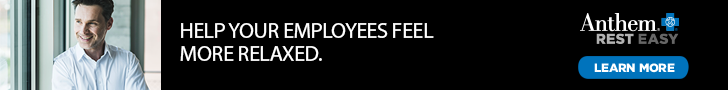
<style>
.page{position:relative;width:728px;height:90px;background:#000000}
.page>*{position:absolute;margin:0}
.t1{font:22px/23px "MyriadPro-Regular";letter-spacing:-0.02em;color:#ffffff;text-transform:uppercase}
.t2{font:12px "Gotham-Black";letter-spacing:-0.02em;color:#ffffff;text-transform:uppercase}
</style>
<div class="page">
<p class="t1" style="left:180px;top:23px;width:254px;height:38px">help your employees feel<br>more relaxed.</p>
<p class="t2" style="left:594px;top:63px;width:81px;height:10px">learn more</p>
</div>
